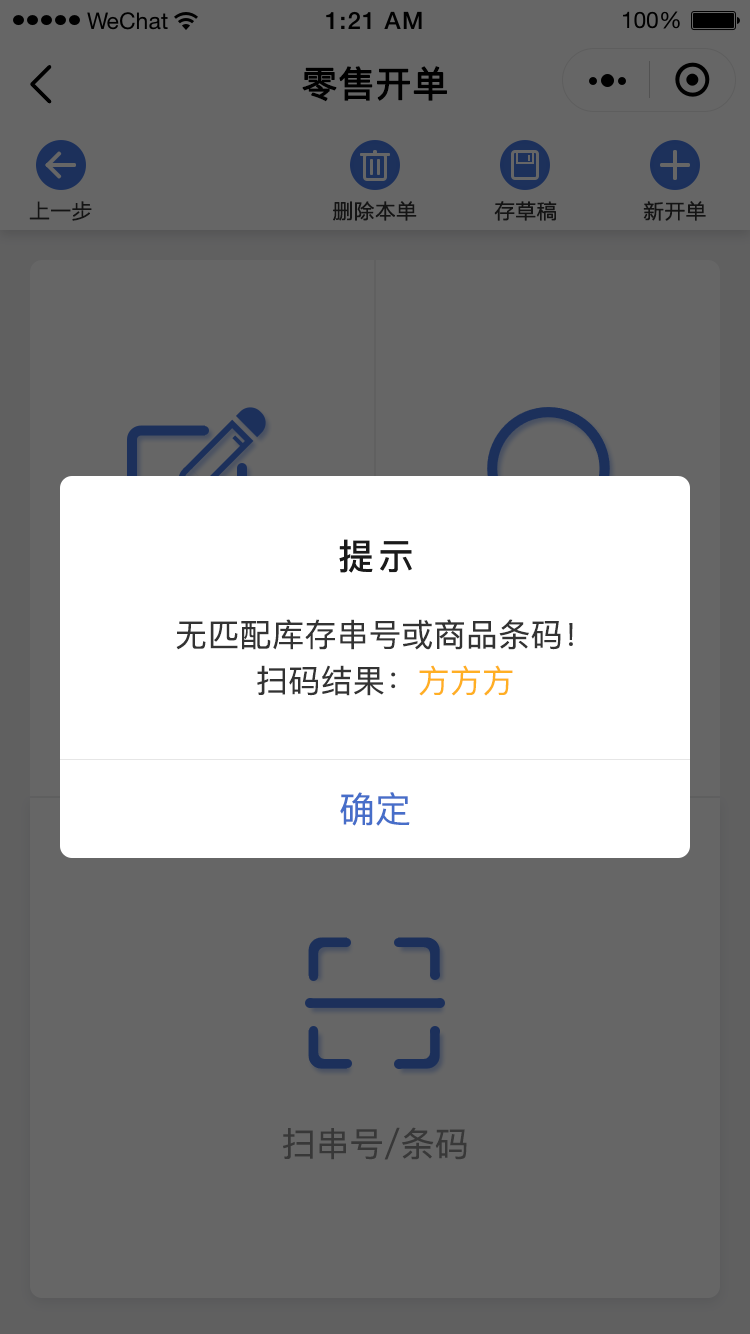
<style>
.page{position:relative;width:750px;height:1334px;background:#666666}
.page>*{position:absolute;margin:0}
.t1{font:36px "PingFang-SC-Medium";color:#000000;font-weight:bold}
.t2{font:20px "STHeitiSC-Medium";color:#141414;font-weight:bold}
.t3{font:36px "PingFang-SC-Bold";letter-spacing:0.1em;color:#1a1a1a}
.t4{font:32px/46px "PingFang-SC-Medium";letter-spacing:0.01em;color:#333333}
.t5{font:32px/46px "PingFang-SC-Medium";letter-spacing:0.01em;color:#ffaf23}
.t6{font:36px "PingFang-SC-Medium";color:#476ec9}
.t7{font:34px "PingFang-SC-Medium";color:#383838}
</style>
<div class="page">
<p class="t1" style="left:302px;top:66px;width:145px;height:36px">零售开单</p>
<p class="t2" style="left:29px;top:201px;width:63px;height:20px">上一步</p>
<p class="t2" style="left:333px;top:201px;width:84px;height:20px">删除本单</p>
<p class="t2" style="left:494px;top:201px;width:63px;height:20px">存草稿</p>
<p class="t2" style="left:643px;top:201px;width:63px;height:20px">新开单</p>
<p class="t3" style="left:339px;top:539px;width:73px;height:34px">提示</p>
<p class="t4" style="left:176px;top:619px;width:397px;height:77px;text-align:center">无匹配库存串号或商品条码！<br>扫码结果：<span class="t5">方方方</span></p>
<p class="t6" style="left:340px;top:792px;width:70px;height:34px">确定</p>
<p class="t7" style="left:283px;top:1127px;width:184px;height:33px">扫串号/条码</p>
</div>
